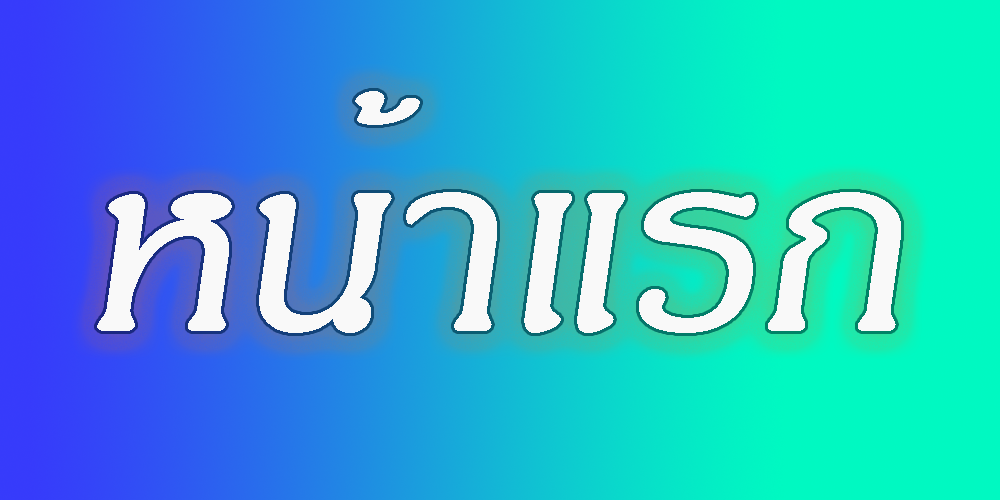
<style>
.page{position:relative;width:1000px;height:500px}
.page>*{position:absolute;margin:0}
.t1{font:343.4px "JSPrapakorn-Italic";color:#f9f9f9}
</style>
<div class="page">
<p class="t1" style="left:97px;top:91px;width:804px;height:242px">หน้าแรก</p>
</div>
